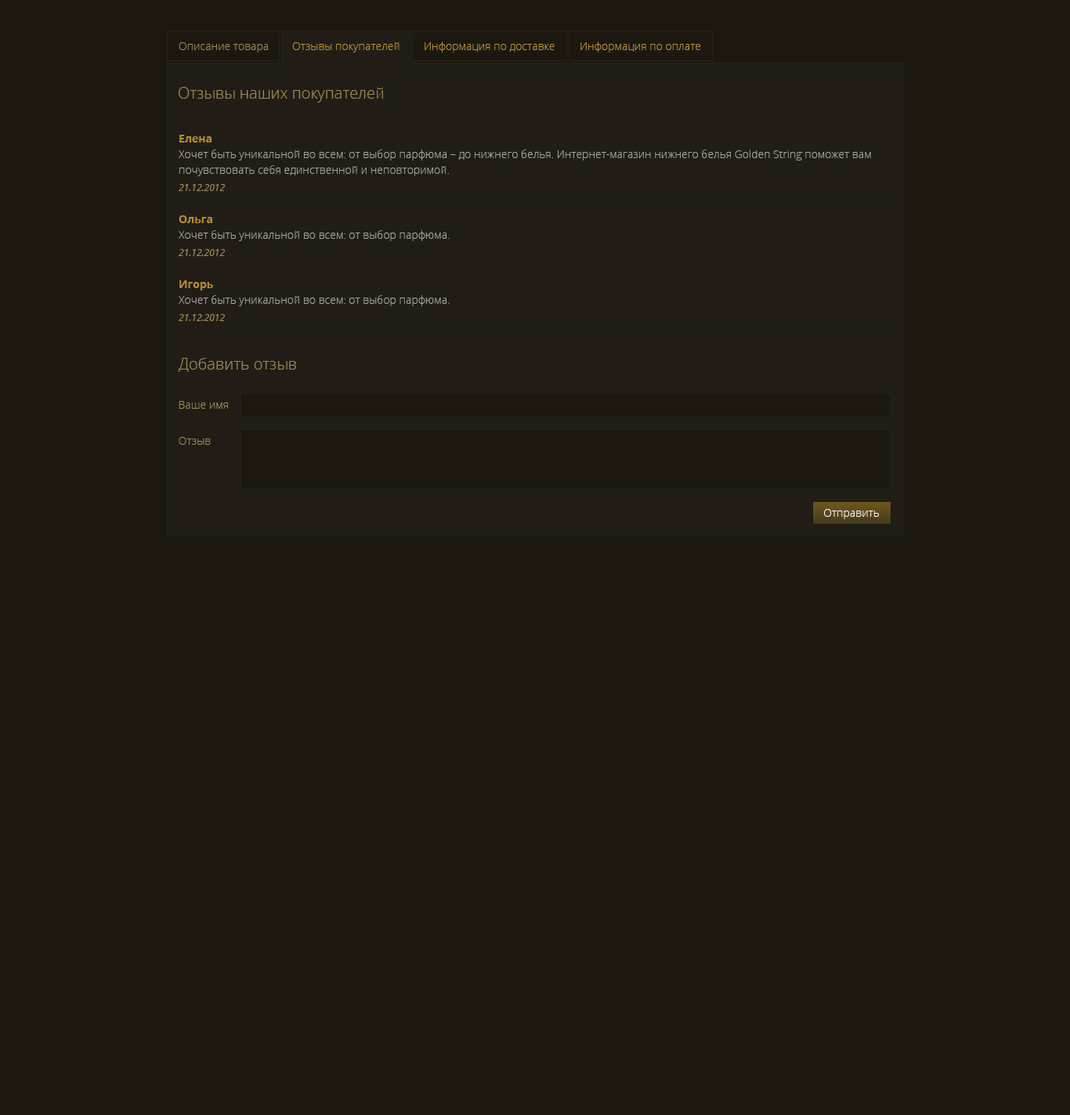
<style>
.page{position:relative;width:1070px;height:1115px;background:#1c1810}
.page>*{position:absolute;margin:0}
.t1{font:11px "OpenSans-Light";color:#be9631}
.t2{font:11px "OpenSans-Light";color:#a18c56}
.t3{font:15.7px "OpenSans-Light";color:#a18c56}
.t4{font:11px/15.7px "OpenSans-Light";color:#aaa7a3}
.t5{font:11px/15.7px "OpenSans-Bold";color:#b48e2f}
.t6{font:9.4px/17.2px "OpenSans-Italic";color:#a18c56}
.t7{font:11px "OpenSans-Light";color:#fffffe}
</style>
<div class="page">
<p class="t1" style="left:424px;top:41px;width:130px;height:11px">Информация по доставке</p>
<p class="t1" style="left:580px;top:41px;width:121px;height:11px">Информация по оплате</p>
<p class="t2" style="left:179px;top:42px;width:89px;height:10px">Описание товара</p>
<p class="t1" style="left:292px;top:42px;width:107px;height:10px">Отзывы покупателей</p>
<p class="t3" style="left:179px;top:87px;width:204px;height:16px">Отзывы наших покупателей</p>
<p class="t4" style="left:179px;top:135px;width:692px;height:56px"><span class="t5">Елена <br></span>Хочет быть уникальной во всем: от выбор парфюма – до нижнего белья. Интернет-магазин нижнего белья Golden String поможет вам почувствовать себя единственной и неповторимой. <br><span class="t6">21.12.2012</span></p>
<p class="t4" style="left:179px;top:215px;width:270px;height:41px"><span class="t5">Ольга<br></span>Хочет быть уникальной во всем: от выбор парфюма. <br><span class="t6">21.12.2012</span></p>
<p class="t4" style="left:179px;top:280px;width:270px;height:41px"><span class="t5">Игорь<br></span>Хочет быть уникальной во всем: от выбор парфюма. <br><span class="t6">21.12.2012</span></p>
<p class="t3" style="left:179px;top:358px;width:117px;height:14px">Добавить отзыв</p>
<p class="t2" style="left:179px;top:401px;width:49px;height:8px">Ваше имя</p>
<p class="t2" style="left:179px;top:437px;width:32px;height:8px">Отзыв</p>
<p class="t7" style="left:824px;top:509px;width:54px;height:10px">Отправить</p>
</div>
